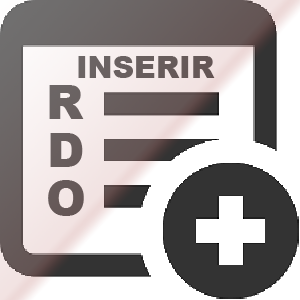
<style>
.page{position:relative;width:300px;height:300px;background:#ffffff}
.page>*{position:absolute;margin:0}
.t1{font:30px "Arial-Black";color:#685e5d}
.t2{font:48px "Arial-Black";color:#6b6363}
.t3{font:48px "Arial-Black";color:#685e5e}
.t4{font:48px "Arial-Black";color:#655858}
</style>
<div class="page">
<p class="t1" style="left:78px;top:56px;width:137px;height:22px">INSERIR</p>
<p class="t2" style="left:49px;top:85px;width:35px;height:34px">R</p>
<p class="t3" style="left:50px;top:133px;width:33px;height:34px">D</p>
<p class="t4" style="left:48px;top:180px;width:36px;height:36px">O</p>
</div>
